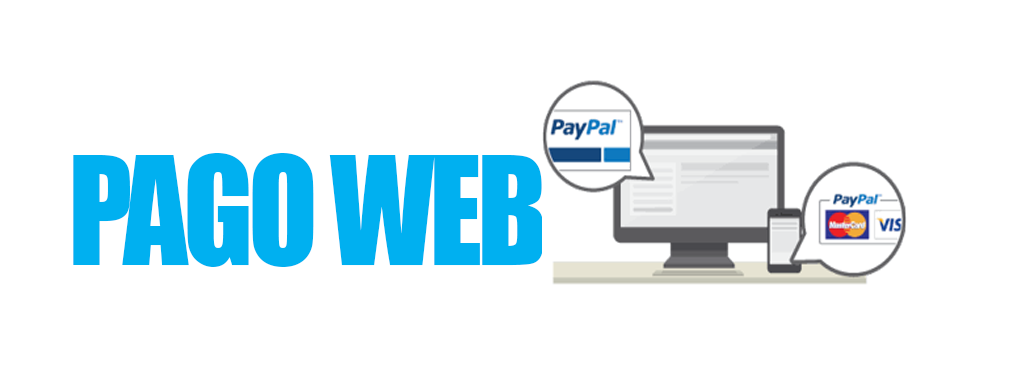
<style>
.page{position:relative;width:1012px;height:374px;background:#ffffff}
.page>*{position:absolute;margin:0}
.t1{font:138.6px "Impact";letter-spacing:-0.04em;color:#00b0f0;scale:0.92 1}
</style>
<div class="page">
<p class="t1" style="left:73px;top:153px;width:471px;height:114px">PAGO WEB</p>
</div>
